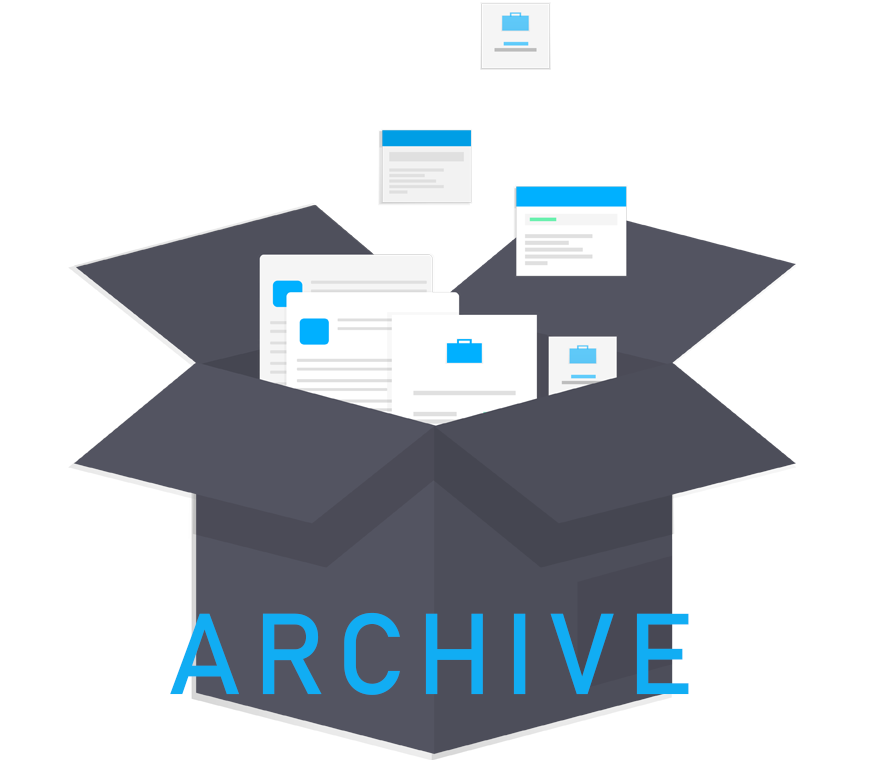
<style>
.page{position:relative;width:886px;height:760px;background:#ffffff}
.page>*{position:absolute;margin:0}
.t1{font:113.2px "Bahnschrift";letter-spacing:0.1em;color:#11adf3;font-weight:bold}
</style>
<div class="page">
<p class="t1" style="left:170px;top:612px;width:519px;height:83px">ARCHIVE</p>
</div>
